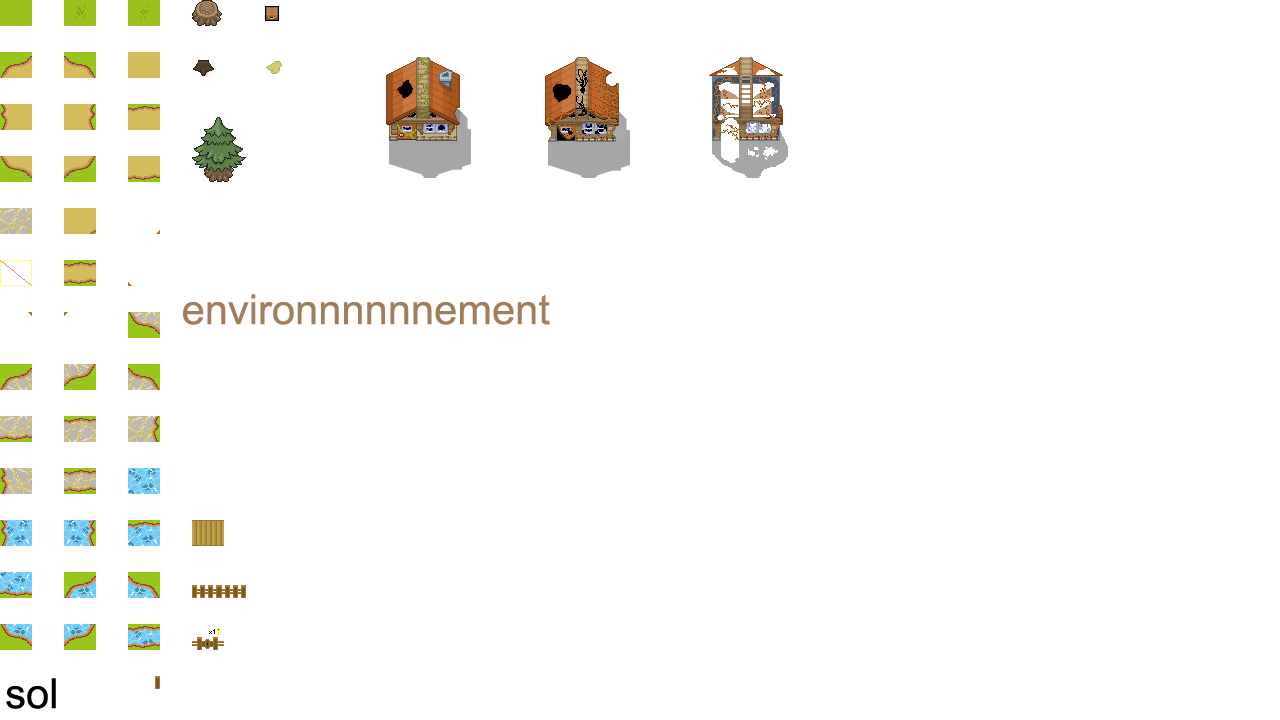
<style>
.page{position:relative;width:1280px;height:720px;background:#ffffff}
.page>*{position:absolute;margin:0}
.t1{font:41.7px "ArialMT";color:#a07e5c}
.t2{font:41.7px "ArialMT";color:#000000}
</style>
<div class="page">
<p class="t1" style="left:183px;top:294px;width:367px;height:31px">environnnnnnement</p>
<p class="t2" style="left:6px;top:678px;width:50px;height:31px">sol</p>
</div>
